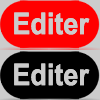
<style>
.page{position:relative;width:100px;height:100px;background:#ff0000}
.page>*{position:absolute;margin:0}
.t1{font:30px "Arial-BoldMT";color:#cccccc;scale:0.9 1}
</style>
<div class="page">
<p class="t1" style="left:14px;top:12px;width:76px;height:23px">Editer</p>
<p class="t1" style="left:14px;top:12px;width:76px;height:23px">Editer</p>
<p class="t1" style="left:14px;top:63px;width:76px;height:23px">Editer</p>
<p class="t1" style="left:14px;top:63px;width:76px;height:23px">Editer</p>
</div>
